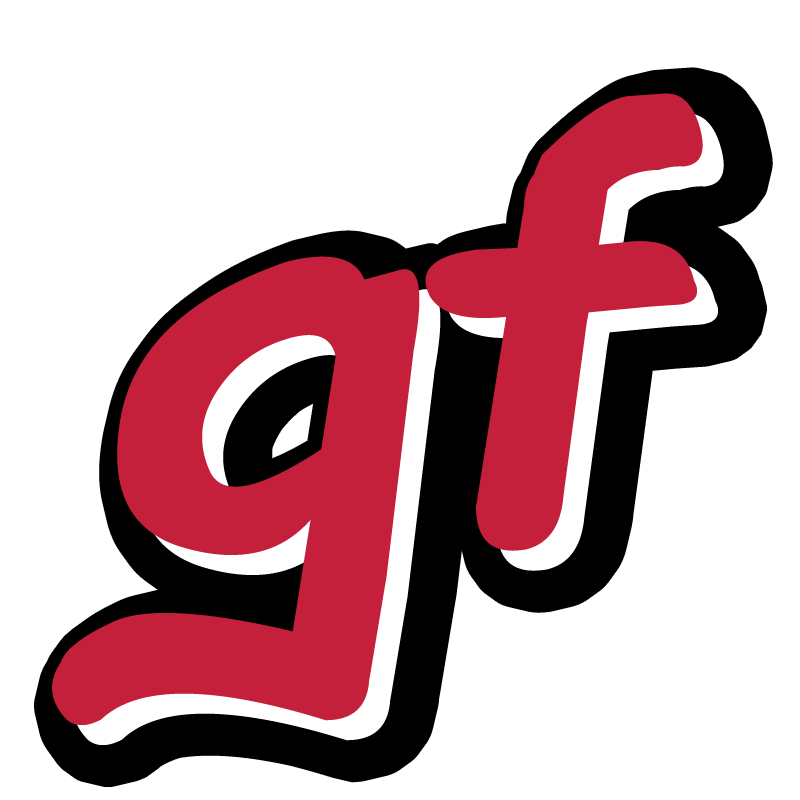
<style>
.page{position:relative;width:800px;height:800px;background:#ffffff}
.page>*{position:absolute;margin:0}
.t1{font:700px "FawnScript";color:#c4203b;scale:1.24 1}
</style>
<div class="page">
<p class="t1" style="left:52px;top:93px;width:651px;height:632px">gf</p>
</div>
